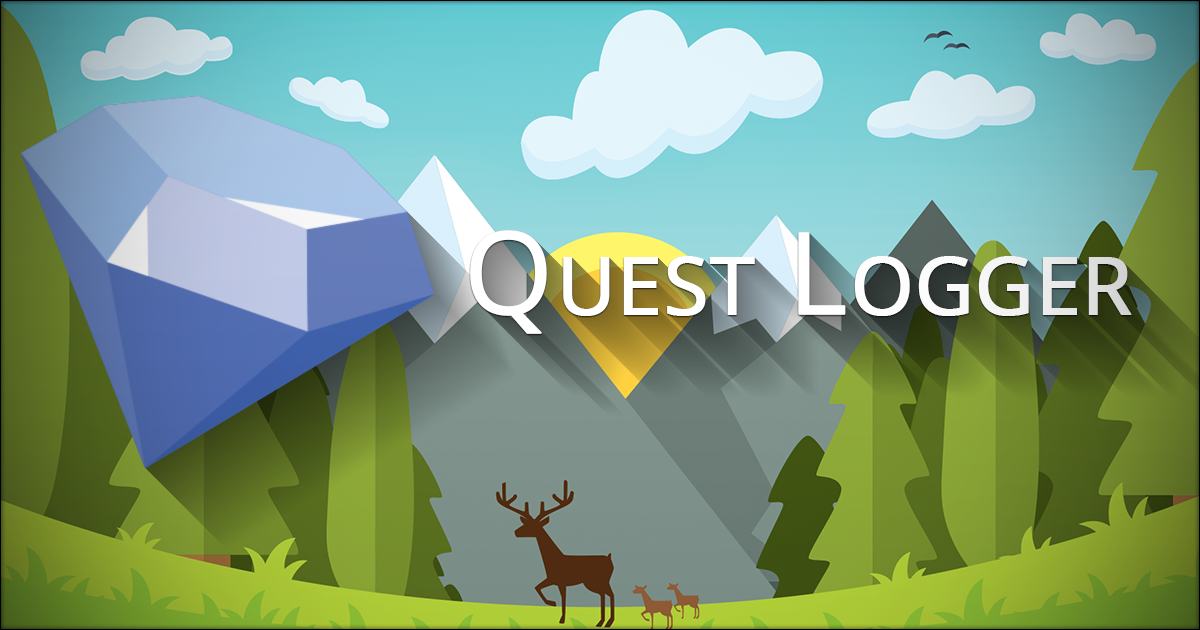
<style>
.page{position:relative;width:1200px;height:630px}
.page>*{position:absolute;margin:0}
.t1{font:114px "OpenSans";color:#ffffff;font-variant:small-caps;font-weight:bold}
</style>
<div class="page">
<p class="t1" style="left:470px;top:230px;width:662px;height:104px">Quest Logger</p>
</div>
